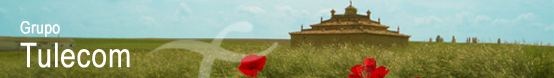
<style>
.page{position:relative;width:554px;height:78px}
.page>*{position:absolute;margin:0}
.t1{font:16.7px "ArialNarrow";color:#ffffff;font-weight:bold}
.t2{font:34px "ArialNarrow";color:#ffffff;font-weight:bold}
</style>
<div class="page">
<p class="t1" style="left:20px;top:21px;width:40px;height:16px">Grupo</p>
<p class="t2" style="left:20px;top:42px;width:110px;height:26px">Tulecom</p>
</div>
